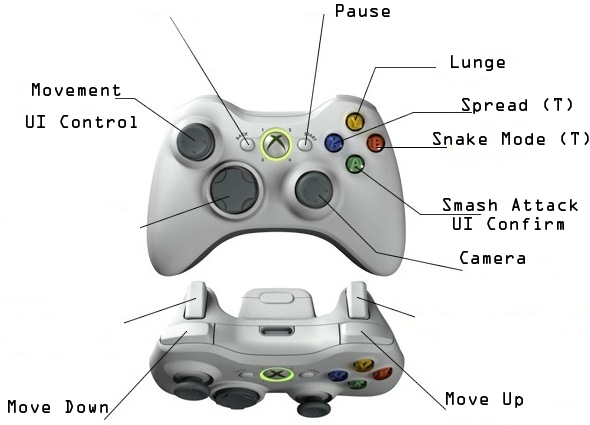
<style>
.page{position:relative;width:590px;height:425px;background:#ffffff}
.page>*{position:absolute;margin:0}
.t1{font:16px "OCRAStd";color:#000000}
</style>
<div class="page">
<p class="t1" style="left:336px;top:4px;width:54px;height:13px">Pause</p>
<p class="t1" style="left:451px;top:55px;width:54px;height:16px">Lunge</p>
<p class="t1" style="left:32px;top:83px;width:89px;height:13px">Movement</p>
<p class="t1" style="left:462px;top:98px;width:110px;height:16px">Spread (T)</p>
<p class="t1" style="left:26px;top:115px;width:111px;height:13px">UI Control</p>
<p class="t1" style="left:433px;top:132px;width:156px;height:13px">Snake Mode (T)</p>
<p class="t1" style="left:443px;top:198px;width:135px;height:13px">Smash Attack</p>
<p class="t1" style="left:453px;top:217px;width:112px;height:13px">UI Confirm</p>
<p class="t1" style="left:460px;top:251px;width:66px;height:13px">Camera</p>
<p class="t1" style="left:8px;top:400px;width:100px;height:13px">Move Down</p>
<p class="t1" style="left:446px;top:392px;width:77px;height:16px">Move Up</p>
</div>
